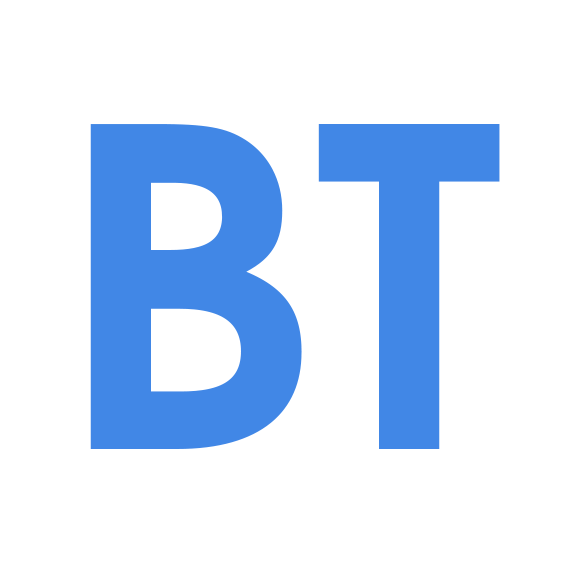
<style>
.page{position:relative;width:580px;height:580px;background:#ffffff}
.page>*{position:absolute;margin:0}
.t1{font:439.2px "TeXGyreAdventor-Bold";color:#4187e6}
</style>
<div class="page">
<p class="t1" style="left:90px;top:124px;width:410px;height:325px">BT</p>
</div>
